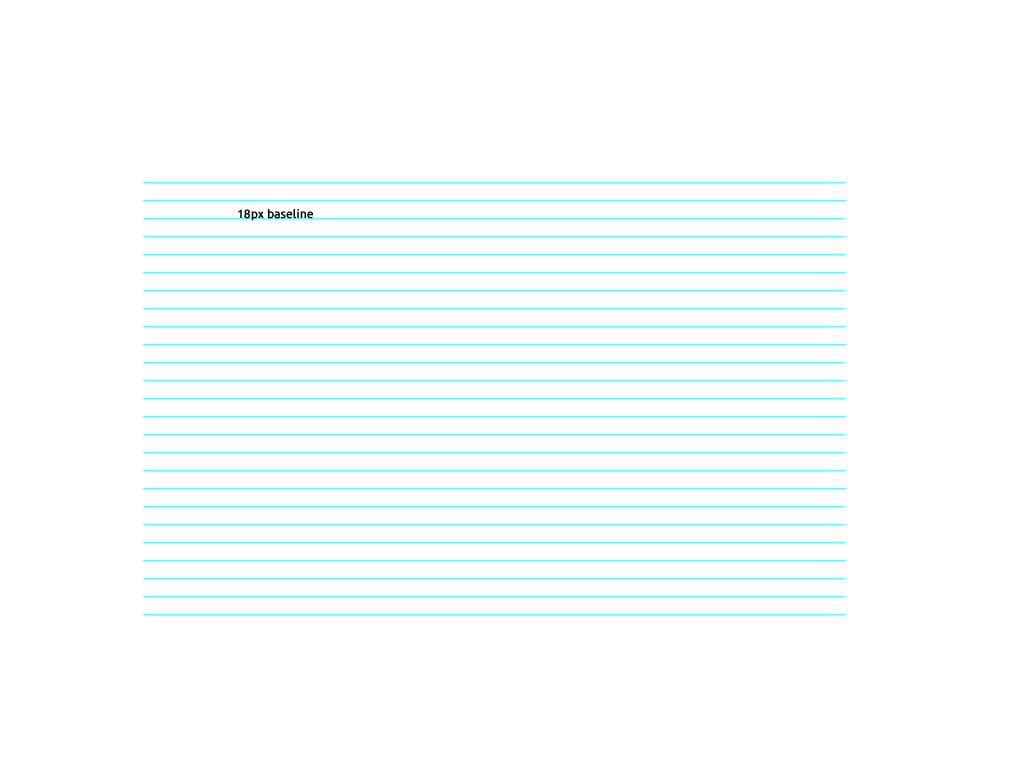
<style>
.page{position:relative;width:1024px;height:768px;background:#ffffff}
.page>*{position:absolute;margin:0}
.t1{font:12px "Ubuntu-Medium";color:#000000}
</style>
<div class="page">
<p class="t1" style="left:238px;top:209px;width:75px;height:12px">18px baseline</p>
</div>
